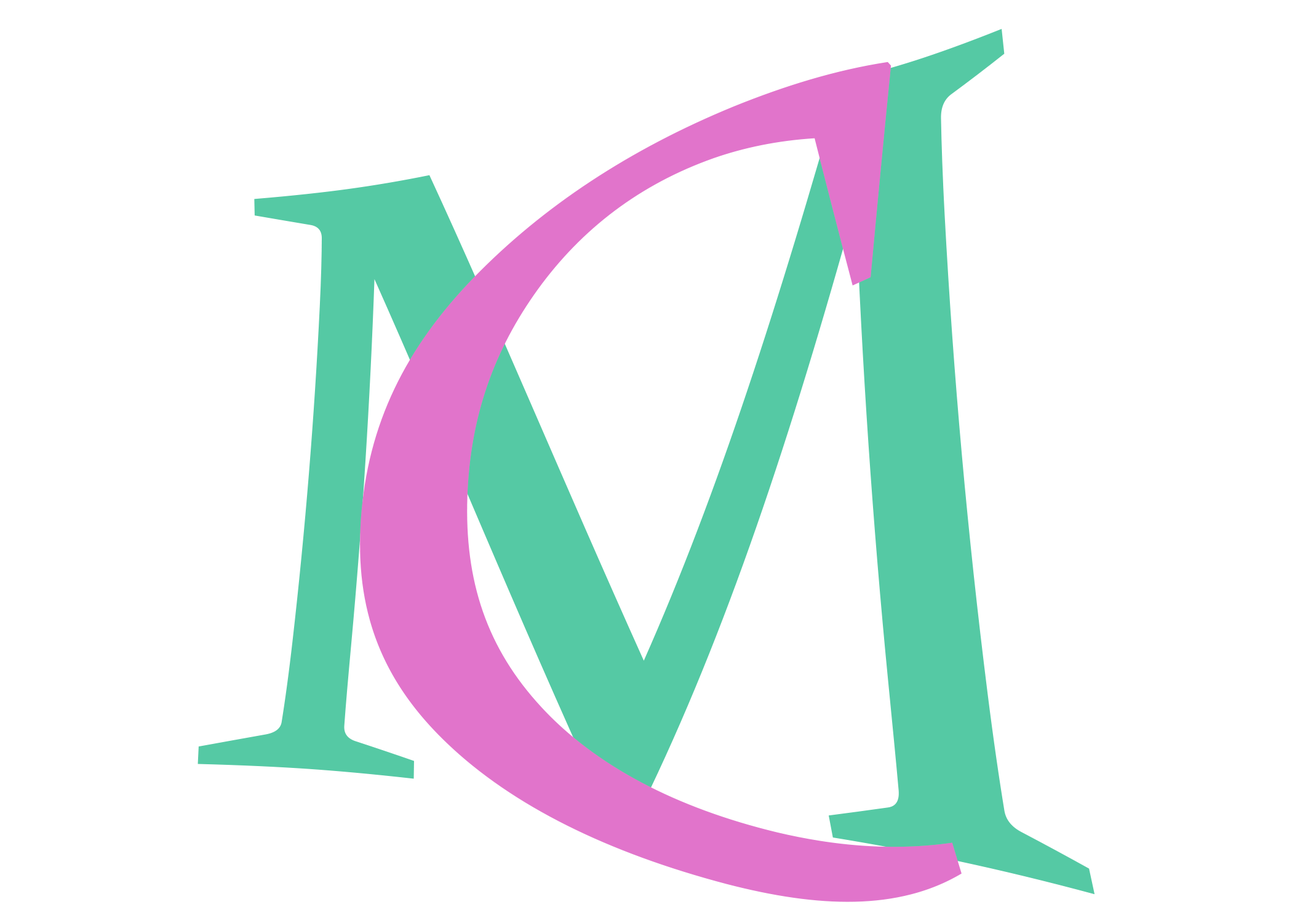
<style>
.page{position:relative;width:1292px;height:923px;background:#ffffff}
.page>*{position:absolute;margin:0}
.t1{font:1063.8px "Constantia";color:#55c9a4}
.t2{font:1084px "Constantia";color:#e174cb}
</style>
<div class="page">
<p class="t1" style="left:197px;top:29px;width:898px;height:866px">M</p>
<p class="t2" style="left:360px;top:62px;width:602px;height:840px">C</p>
</div>
